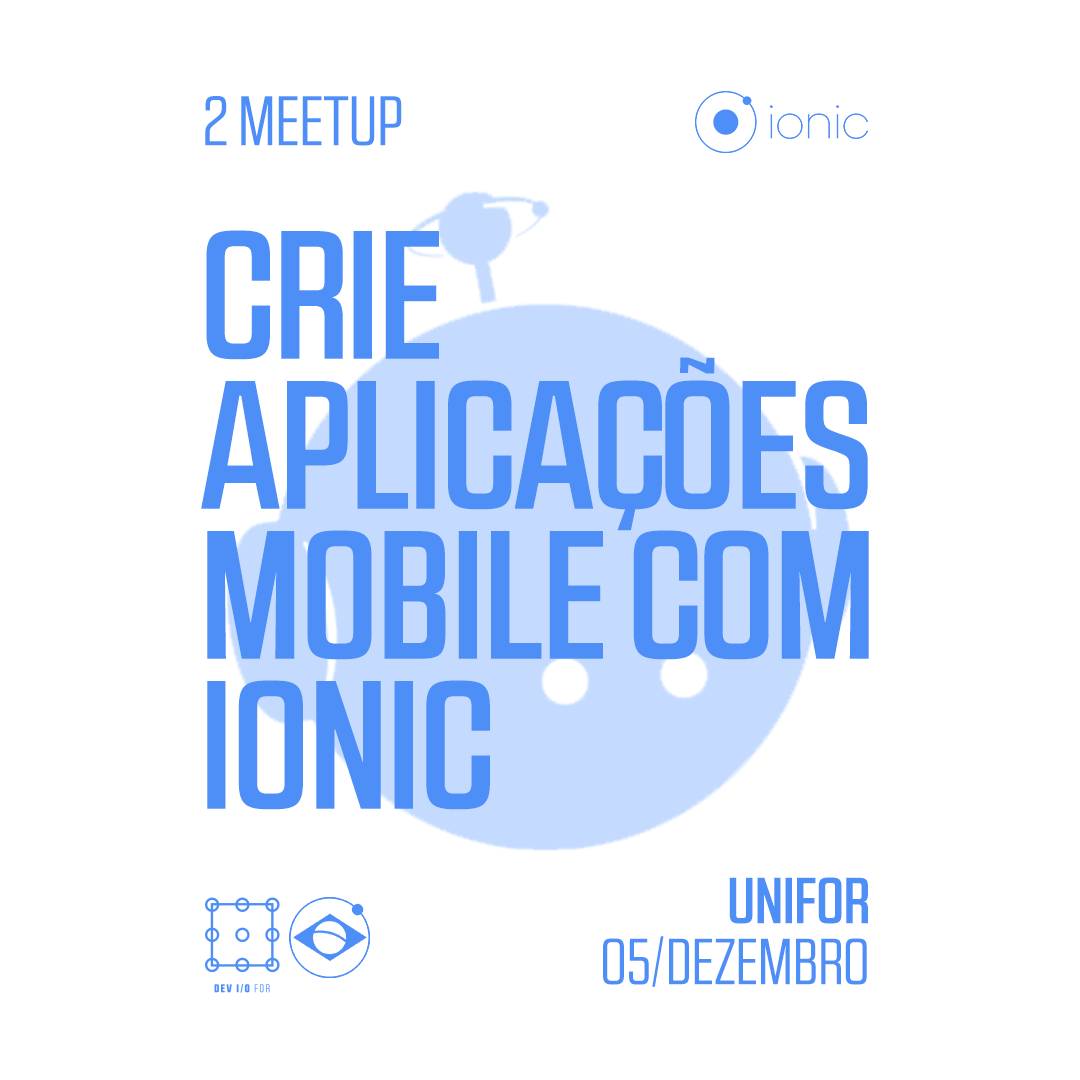
<style>
.page{position:relative;width:1080px;height:1080px;background:#ffffff}
.page>*{position:absolute;margin:0}
.t1{font:70px "RBNo2.1a-Book";color:#4e8ef7;text-transform:uppercase}
.t2{font:182px/150px "RBNo2.1a-Medium";color:#4e8ef7;text-transform:uppercase}
.t3{font:65px/61px "RBNo2.1a-Book";color:#4e8ef7;text-transform:uppercase}
.t4{font:65px/61px "RBNo2.1a-Medium";color:#4e8ef7;text-transform:uppercase}
</style>
<div class="page">
<p class="t1" style="left:205px;top:96px;width:197px;height:50px">2 meetup</p>
<p class="t2" style="left:201px;top:230px;width:668px;height:580px">CRIE <br>APLICAÇÕES <br>MOBILE com<br>ionic</p>
<p class="t3" style="left:603px;top:877px;width:265px;height:110px;text-align:right"><span class="t4">UNIFOR<br></span>05/dezembro</p>
</div>
